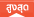
<style>
.page{position:relative;width:34px;height:17px;background:#f05a3c}
.page>*{position:absolute;margin:0}
.t1{font:10px "NotoSansThai-Regular";color:#ffffff}
</style>
<div class="page">
<p class="t1" style="left:6px;top:4px;width:23px;height:9px">สูงสุด</p>
</div>
